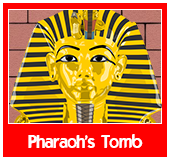
<style>
.page{position:relative;width:170px;height:160px;background:#ff0000}
.page>*{position:absolute;margin:0}
.t1{font:18px "ELEGANCE";color:#ffffff}
</style>
<div class="page">
<p class="t1" style="left:28px;top:134px;width:115px;height:14px">Pharaoh's Tomb</p>
</div>
